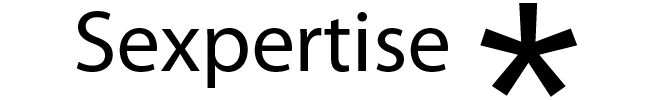
<style>
.page{position:relative;width:656px;height:100px;background:#ffffff}
.page>*{position:absolute;margin:0}
.t1{font:275.7px "Incised901BT-Light";color:#000000}
.t2{font:87.6px "MyriadPro-Regular";color:#000000}
</style>
<div class="page">
<p class="t1" style="left:480px;top:3px;width:97px;height:94px">*</p>
<p class="t2" style="left:76px;top:11px;width:372px;height:77px">Sexpertise</p>
</div>
